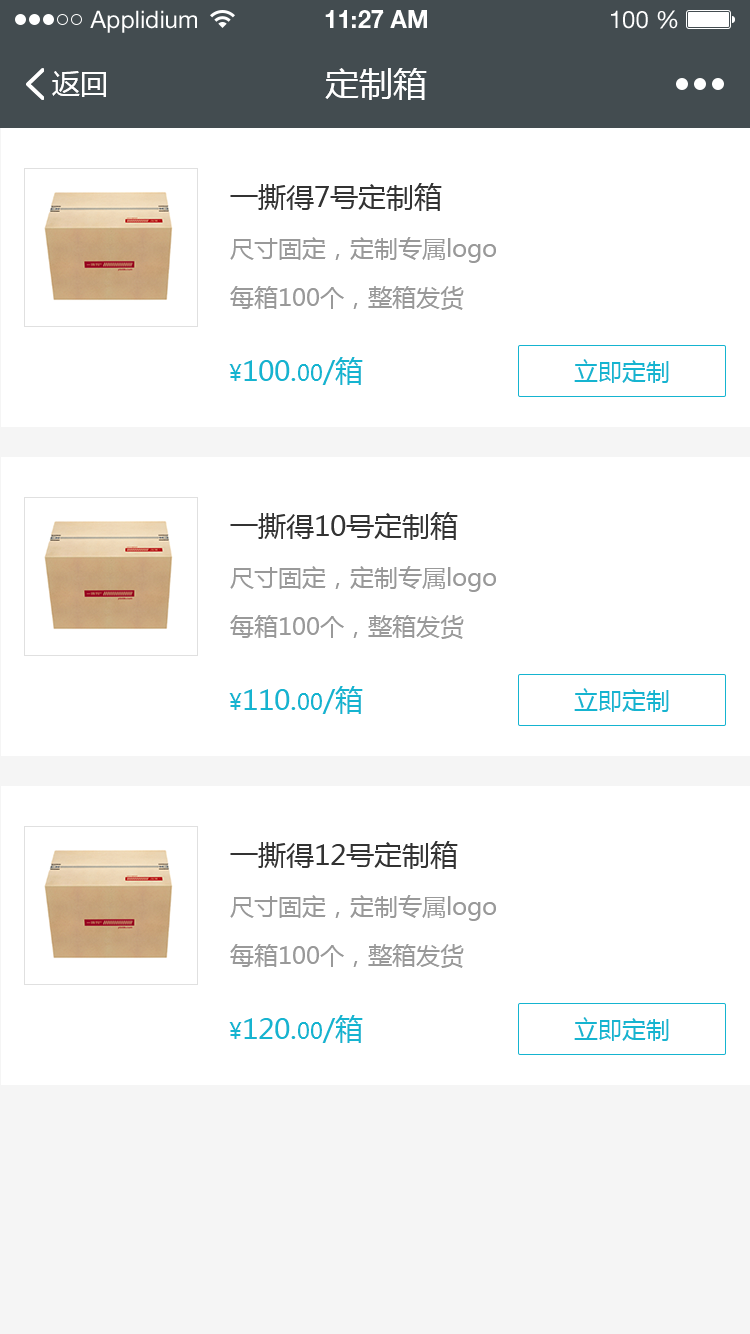
<style>
.page{position:relative;width:750px;height:1334px;background:#ffffff}
.page>*{position:absolute;margin:0}
.t1{font:24px "HelveticaNeueLTStd-Roman";color:#ffffff}
.t2{font:24px "HelveticaNeueLTStd-Bd";color:#ffffff}
.t3{font:28px "MicrosoftYaHei";color:#ffffff}
.t4{font:34px "MicrosoftYaHei";color:#ffffff}
.t5{font:28px "MicrosoftYaHei";color:#333333}
.t6{font:24px "MicrosoftYaHei";color:#999999}
.t7{font:28px "MicrosoftYaHei";color:#15b4d0}
.t8{font:22px "MicrosoftYaHei";color:#15b4d0}
.t9{font:24px "MicrosoftYaHei";color:#15b4d0}
</style>
<div class="page">
<p class="t1" style="left:90px;top:10px;width:107px;height:23px">Applidium</p>
<p class="t2" style="left:325px;top:10px;width:102px;height:18px">11:27 AM</p>
<p class="t1" style="left:611px;top:10px;width:67px;height:19px">100 %</p>
<p class="t3" style="left:52px;top:71px;width:54px;height:26px">返回</p>
<p class="t4" style="left:325px;top:68px;width:102px;height:32px">定制箱</p>
<p class="t5" style="left:230px;top:183px;width:212px;height:28px">一撕得7号定制箱</p>
<p class="t6" style="left:230px;top:237px;width:266px;height:26px">尺寸固定，定制专属logo</p>
<p class="t6" style="left:230px;top:286px;width:234px;height:24px">每箱100个，整箱发货</p>
<p class="t7" style="left:229px;top:357px;width:134px;height:28px"><span class="t8">¥</span>100.<span class="t8">00</span>/箱</p>
<p class="t9" style="left:574px;top:359px;width:95px;height:24px">立即定制</p>
<p class="t5" style="left:230px;top:512px;width:228px;height:28px">一撕得10号定制箱</p>
<p class="t6" style="left:230px;top:566px;width:266px;height:26px">尺寸固定，定制专属logo</p>
<p class="t6" style="left:230px;top:615px;width:234px;height:24px">每箱100个，整箱发货</p>
<p class="t7" style="left:229px;top:686px;width:134px;height:28px"><span class="t8">¥</span>110.<span class="t8">00</span>/箱</p>
<p class="t9" style="left:574px;top:688px;width:95px;height:24px">立即定制</p>
<p class="t5" style="left:230px;top:841px;width:228px;height:28px">一撕得12号定制箱</p>
<p class="t6" style="left:230px;top:895px;width:266px;height:26px">尺寸固定，定制专属logo</p>
<p class="t6" style="left:230px;top:944px;width:234px;height:24px">每箱100个，整箱发货</p>
<p class="t7" style="left:229px;top:1015px;width:134px;height:28px"><span class="t8">¥</span>120.<span class="t8">00</span>/箱</p>
<p class="t9" style="left:574px;top:1017px;width:95px;height:24px">立即定制</p>
</div>
